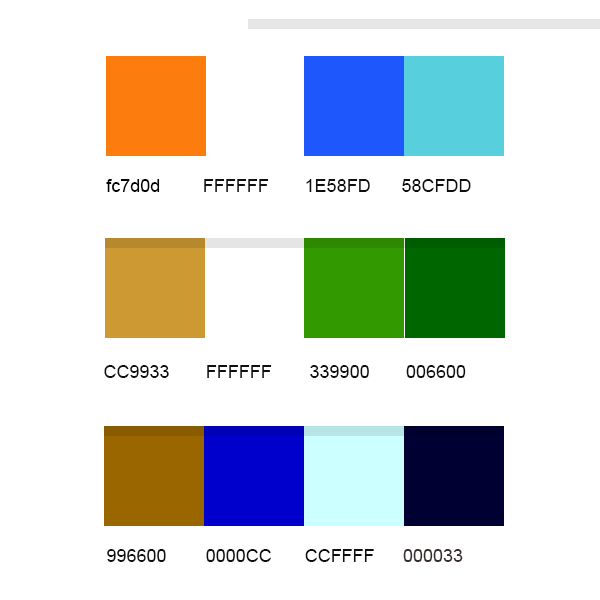
<style>
.page{position:relative;width:600px;height:600px;background:#ffffff}
.page>*{position:absolute;margin:0}
.t1{font:18px "ArialMT";color:#000000}
.t2{font:18px "ArialMT";color:#0f0f0f;text-transform:uppercase}
.t3{font:18px "ArialMT";color:#362f2d;text-transform:uppercase}
</style>
<div class="page">
<p class="t1" style="left:106px;top:179px;width:54px;height:13px">fc7d0d</p>
<p class="t2" style="left:204px;top:179px;width:65px;height:13px">ffffff</p>
<p class="t2" style="left:306px;top:179px;width:64px;height:13px">1e58fd</p>
<p class="t2" style="left:402px;top:179px;width:69px;height:13px">58cfdd</p>
<p class="t2" style="left:104px;top:365px;width:65px;height:13px">cc9933</p>
<p class="t2" style="left:207px;top:365px;width:65px;height:13px">ffffff</p>
<p class="t2" style="left:310px;top:365px;width:59px;height:13px">339900</p>
<p class="t2" style="left:406px;top:365px;width:60px;height:13px">006600</p>
<p class="t2" style="left:107px;top:549px;width:59px;height:13px">996600</p>
<p class="t2" style="left:206px;top:549px;width:65px;height:13px">0000cc</p>
<p class="t2" style="left:305px;top:549px;width:69px;height:13px">ccffff</p>
<p class="t3" style="left:403px;top:549px;width:60px;height:13px">000033</p>
</div>
